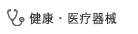
<style>
.page{position:relative;width:138px;height:34px;background:#ffffff}
.page>*{position:absolute;margin:0}
.t1{font:12.6px "STXihei";letter-spacing:0.05em;color:#363636;scale:0.95 1}
</style>
<div class="page">
<p class="t1" style="left:29px;top:12px;width:88px;height:13px">健康·医疗器械</p>
</div>
